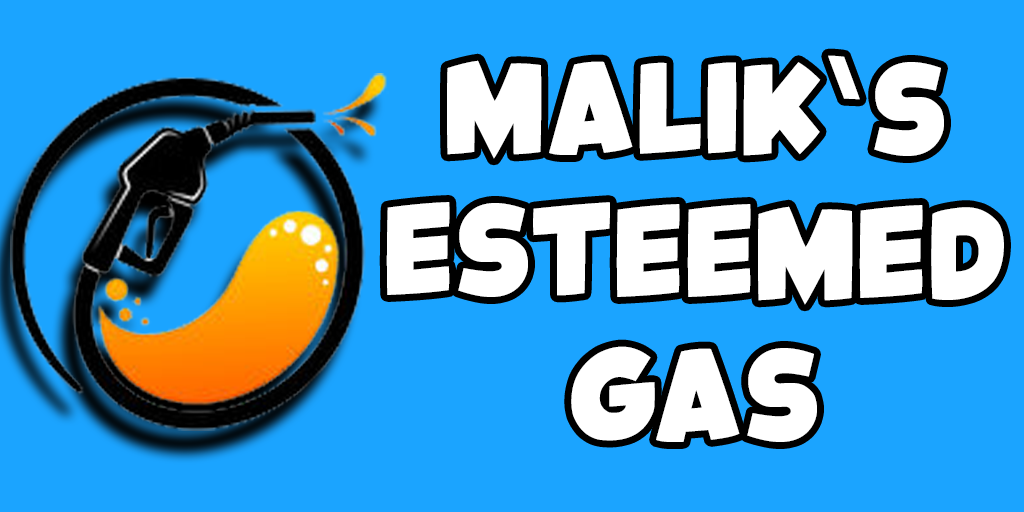
<style>
.page{position:relative;width:1024px;height:512px;background:#1ba4ff}
.page>*{position:absolute;margin:0}
.t1{font:83.6px/143.3px "KidsMagazine";color:#ffffff}
.t2{font:38.5px "KidsMagazine";color:#ffffff;scale:1.3 1}
</style>
<div class="page">
<p class="t1" style="left:386px;top:60px;width:618px;height:382px;text-align:center">MALIK S<br>ESTEEMED<br>GAS</p>
<p class="t2" style="left:828px;top:55px;width:32px;height:45px;rotate:7deg">\</p>
</div>
